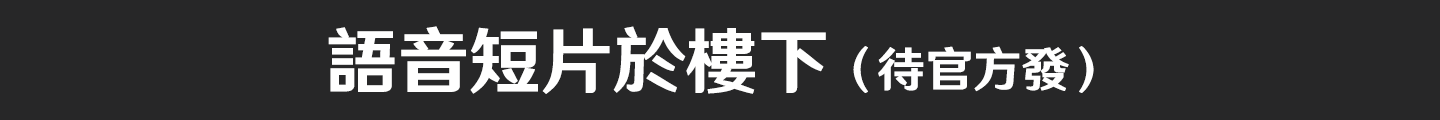
<style>
.page{position:relative;width:1440px;height:120px;background:#272728}
.page>*{position:absolute;margin:0}
.t1{font:72px "HYWenHei-HEW";color:#ffffff}
.t2{font:48px "HYWenHei-HEW";color:#ffffff}
</style>
<div class="page">
<p class="t1" style="left:328px;top:26px;width:766px;height:68px">語音短片於樓下<span class="t2">（待官方發）</span></p>
</div>
